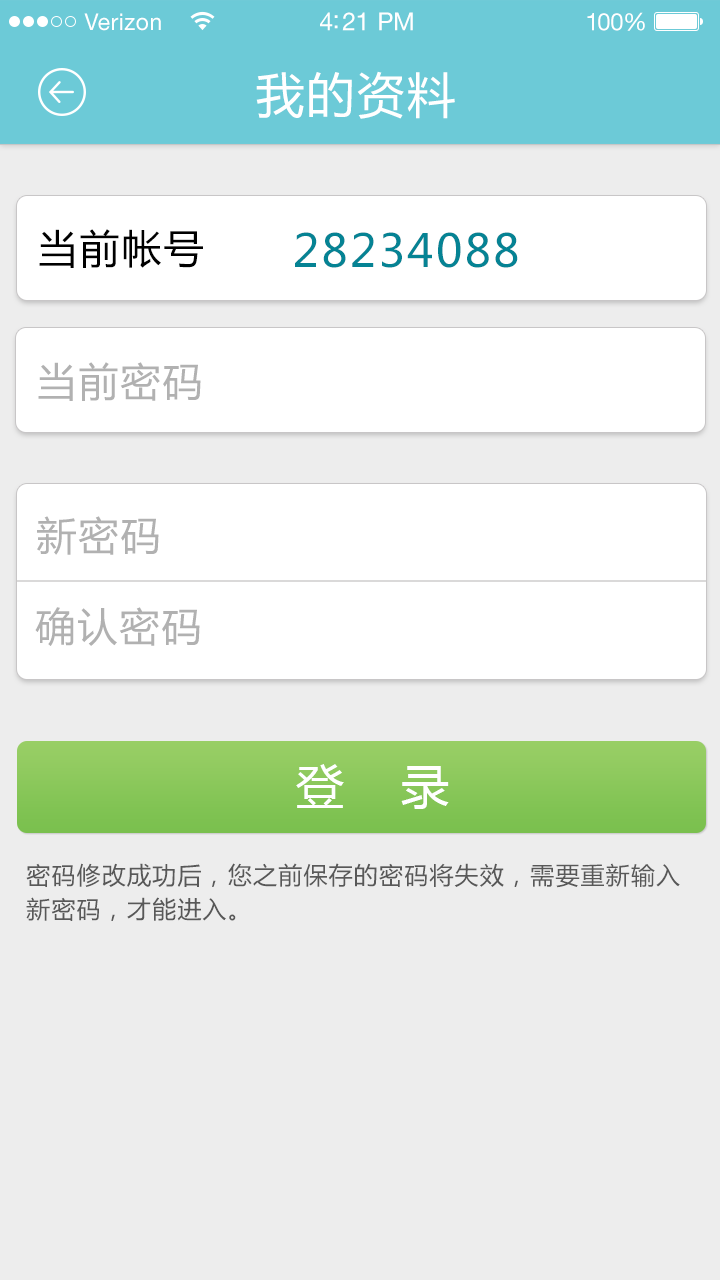
<style>
.page{position:relative;width:720px;height:1280px;background:#ededed}
.page>*{position:absolute;margin:0}
.t1{font:23px "HelveticaNeueLTStd-Roman";letter-spacing:0.02em;color:#ffffff}
.t2{font:25px "HelveticaNeueLTStd-Roman";letter-spacing:-0.02em;color:#ffffff}
.t3{font:24px "HelveticaNeueLTStd-Roman";letter-spacing:-0.02em;color:#ffffff}
.t4{font:48px "MicrosoftYaHei";letter-spacing:0.05em;color:#ffffff}
.t5{font:40px "MicrosoftYaHei";letter-spacing:0.05em;color:#000000}
.t6{font:45px "MicrosoftYaHei";letter-spacing:0.05em;color:#058394}
.t7{font:40px "MicrosoftYaHei";letter-spacing:0.05em;color:#b1b1b1}
.t8{font:48px "MicrosoftYaHei";color:#ffffff}
.t9{font:24px/34px "MicrosoftYaHei";letter-spacing:0.05em;color:#585858}
</style>
<div class="page">
<p class="t1" style="left:84px;top:13px;width:77px;height:18px">Verizon</p>
<p class="t2" style="left:320px;top:12px;width:93px;height:19px">4:21 PM</p>
<p class="t3" style="left:587px;top:12px;width:58px;height:19px">100%</p>
<p class="t4" style="left:256px;top:71px;width:199px;height:48px">我的资料</p>
<p class="t5" style="left:39px;top:229px;width:164px;height:39px">当前帐号</p>
<p class="t6" style="left:295px;top:232px;width:223px;height:36px">28234088</p>
<p class="t7" style="left:38px;top:362px;width:163px;height:39px">当前密码</p>
<p class="t7" style="left:37px;top:516px;width:122px;height:39px">新密码</p>
<p class="t7" style="left:35px;top:607px;width:165px;height:39px">确认密码</p>
<p class="t8" style="left:296px;top:764px;width:153px;height:45px">登    录</p>
<p class="t9" style="left:26px;top:863px;width:654px;height:58px">密码修改成功后，您之前保存的密码将失效，需要重新输入<br>新密码，才能进入。</p>
</div>
